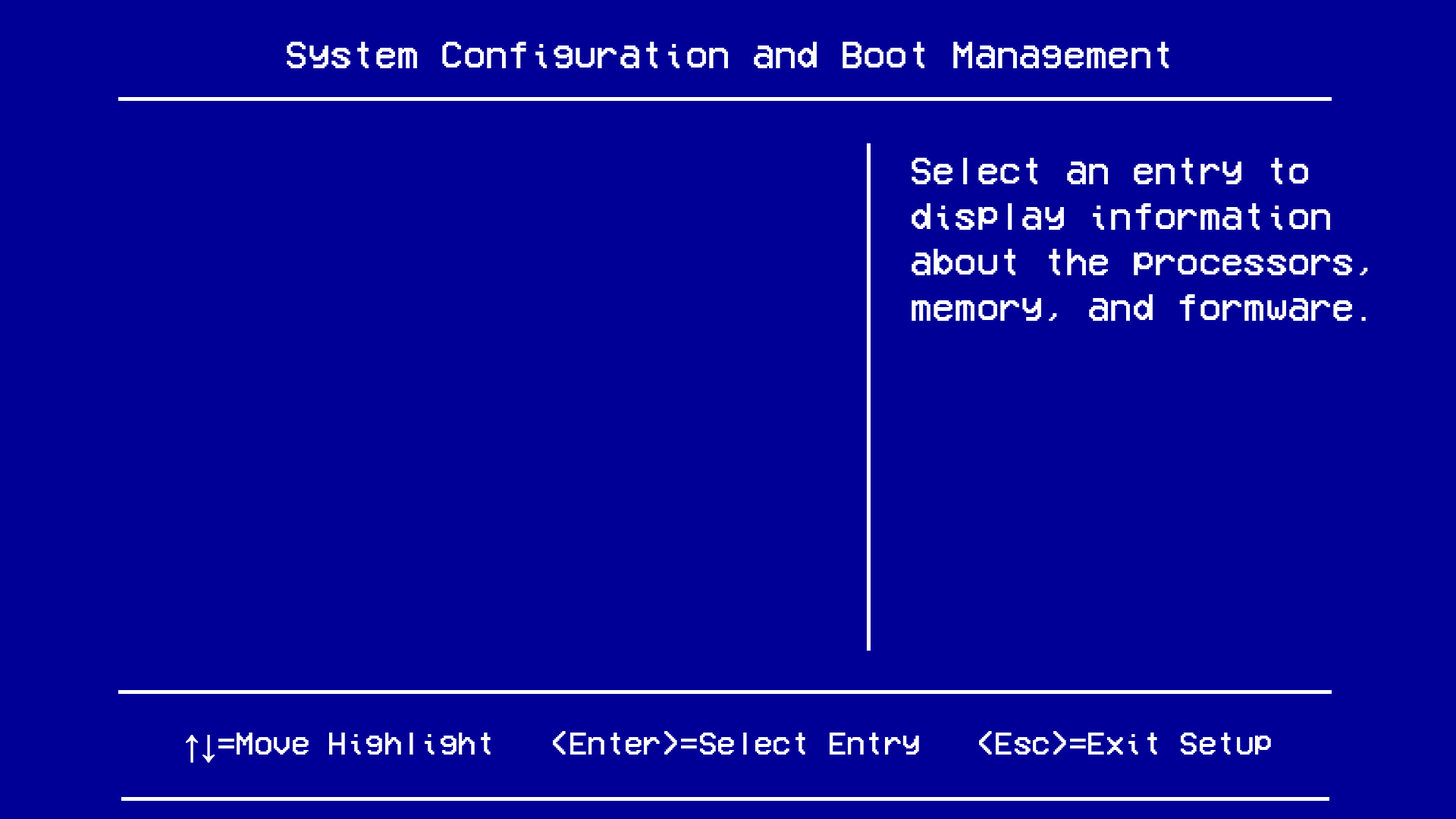
<style>
.page{position:relative;width:1456px;height:819px;background:#000096}
.page>*{position:absolute;margin:0}
.t1{font:9.1px "VCROSDMono";color:#ffffff}
.t2{font:31.6px "VCROSDMono";color:#ffffff}
.t3{font:31.6px "TimesNewRomanPSMT";color:#ffffff;font-weight:bold}
</style>
<div class="page">
<p class="t1" style="left:287px;top:42px;width:882px;height:26px">System Configuration and Boot Management</p>
<p class="t1" style="left:912px;top:158px;width:456px;height:163px">Select an entry to<br>display information<br>about the processors,<br>memory, and formware.</p>
<p class="t2" style="left:186px;top:731px;width:1085px;height:32px"><span class="t3">↑↓</span>=Move Highlight   &lt;Enter&gt;=Select Entry   &lt;Esc&gt;=Exit Setup</p>
</div>
